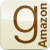
<style>
.page{position:relative;width:50px;height:50px}
.page>*{position:absolute;margin:0}
.t1{font:12px "SegoeUI-Bold";color:#7c460f}
</style>
<div class="page">
<p class="t1" style="left:38px;top:3px;width:9px;height:45px;rotate:-90deg">Amazon</p>
</div>
